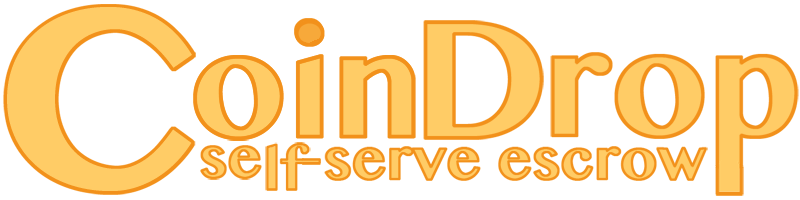
<style>
.page{position:relative;width:800px;height:200px;background:#ffffff}
.page>*{position:absolute;margin:0}
.t1{font:252.5px "OriyaMN-Bold";color:#ffcc66}
.t2{font:149.2px "OriyaMN-Bold";color:#ffcc66}
.t3{font:166.4px "OriyaMN-Bold";color:#ffcc66}
.t4{font:57.4px "OriyaMN-Bold"}
.t5{font:57.4px "OriyaMN-Bold";color:#ffcc66}
</style>
<div class="page">
<p class="t1" style="left:7px;top:7px;width:185px;height:184px">C</p>
<p class="t2" style="left:195px;top:22px;width:218px;height:117px">oin</p>
<p class="t3" style="left:426px;top:22px;width:116px;height:116px">D</p>
<p class="t2" style="left:553px;top:55px;width:243px;height:112px">rop</p>
<p class="t4" style="left:201px;top:146px;width:59px;height:32px">se</p>
<p class="t5" style="left:266px;top:145px;width:42px;height:45px">lf</p>
<p class="t5" style="left:326px;top:148px;width:380px;height:32px">serve escrow</p>
</div>
